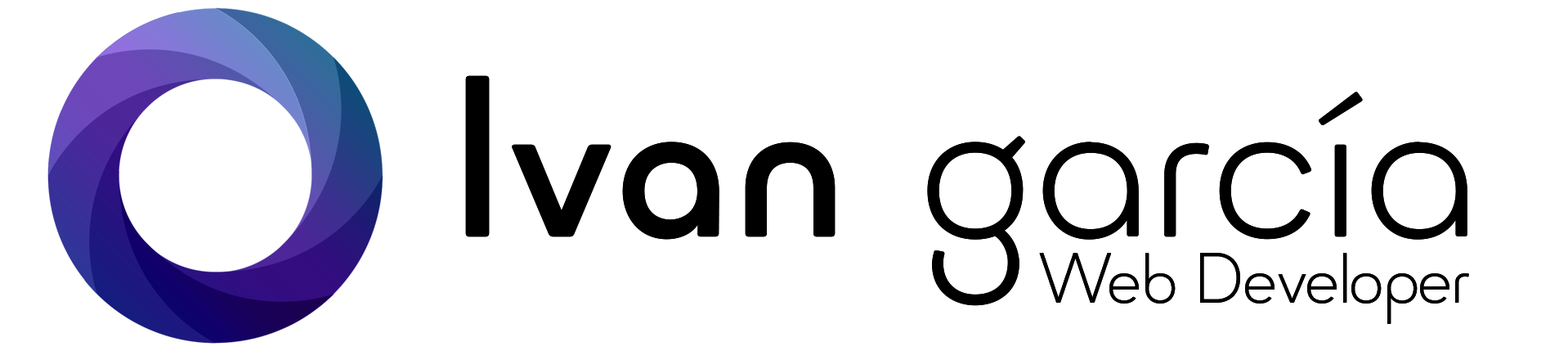
<style>
.page{position:relative;width:1568px;height:351px;background:#ffffff}
.page>*{position:absolute;margin:0}
.t1{font:228.7px "Minimo-Light";letter-spacing:-0.035em;color:#000000;font-weight:bold}
.t2{font:228.7px "Minimo-Medium";letter-spacing:-0.035em;color:#000000;font-weight:bold}
.t3{font:70.9px "Minimo-Light";letter-spacing:-0.035em;color:#000000}
</style>
<div class="page">
<p class="t1" style="left:465px;top:75px;width:1002px;height:231px"><span class="t2">Ivan </span>garcía</p>
<p class="t3" style="left:1039px;top:253px;width:430px;height:71px">Web Developer</p>
</div>
